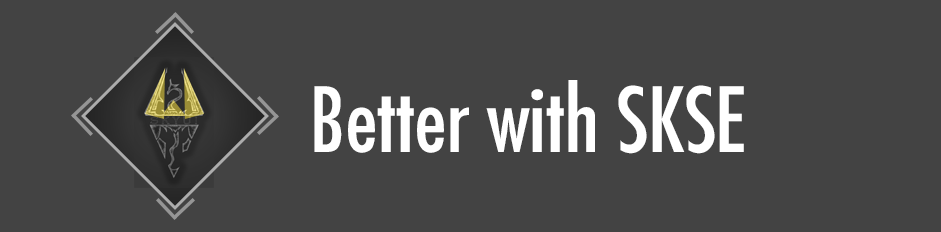
<style>
.page{position:relative;width:941px;height:232px;background:#434343}
.page>*{position:absolute;margin:0}
.t1{font:87px "Futura-Condensed-Normal";color:#ffffff}
</style>
<div class="page">
<p class="t1" style="left:314px;top:80px;width:430px;height:74px">Better with SKSE</p>
</div>
